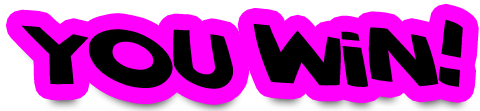
<style>
.page{position:relative;width:480px;height:111px;background:#ff00fc}
.page>*{position:absolute;margin:0}
.t1{font:82.6px "VTCScreamItLoud";color:#000000}
</style>
<div class="page">
<p class="t1" style="left:21px;top:19px;width:442px;height:70px">you win!</p>
</div>
